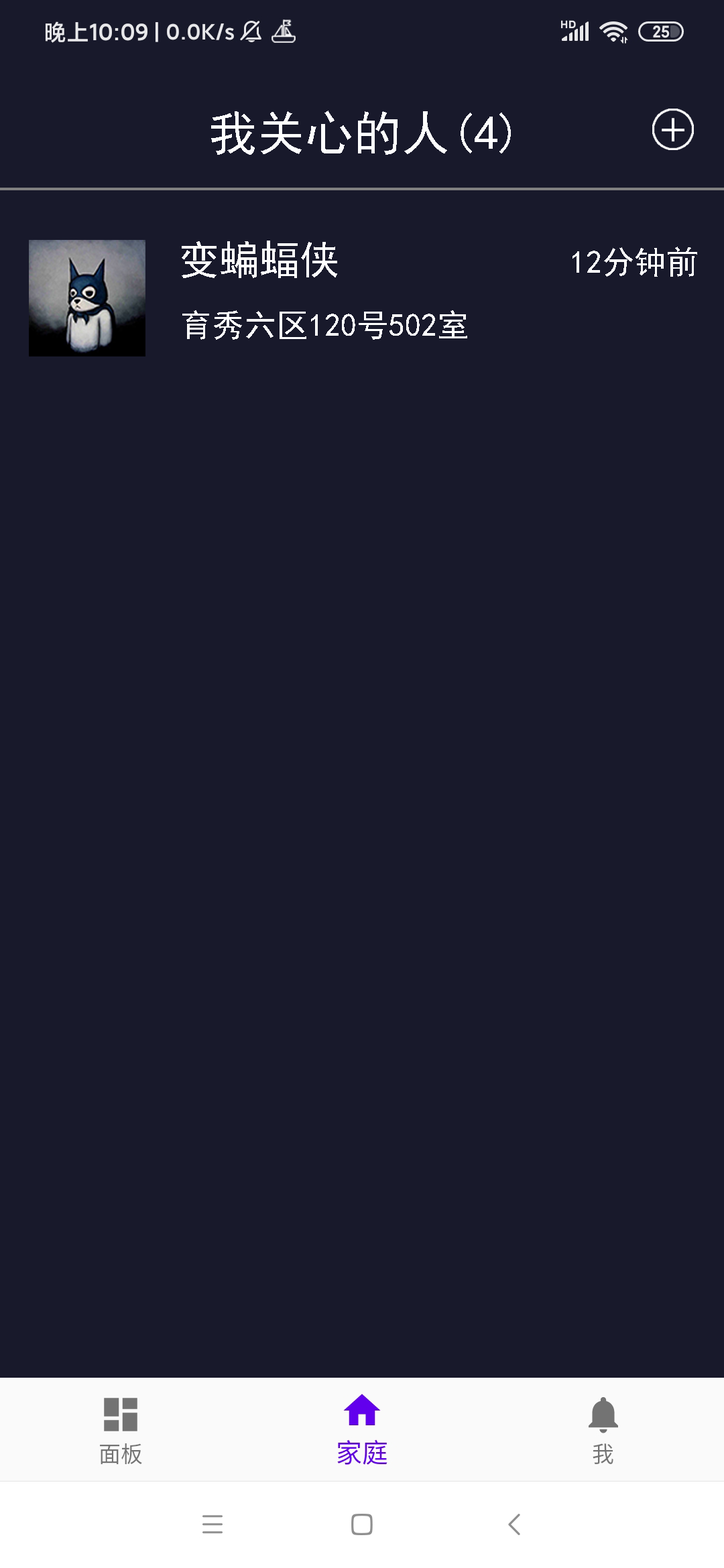
<style>
.page{position:relative;width:724px;height:1568px;background:#18192b}
.page>*{position:absolute;margin:0}
.t1{font:48.1px "SimHei";color:#fefefe;text-transform:uppercase}
.t2{font:40.2px "SimHei";color:#fefefe;text-transform:uppercase}
.t3{font:32.2px "SimHei";color:#fefefe;text-transform:uppercase}
</style>
<div class="page">
<p class="t1" style="left:211px;top:111px;width:300px;height:44px">我关心的人(4)</p>
<p class="t2" style="left:182px;top:241px;width:155px;height:37px">变蝙蝠侠</p>
<p class="t3" style="left:572px;top:247px;width:125px;height:30px">12分钟前</p>
<p class="t3" style="left:182px;top:310px;width:285px;height:30px">育秀六区120号502室</p>
</div>
